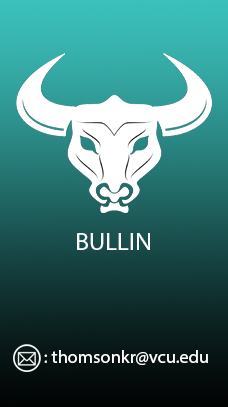
<style>
.page{position:relative;width:228px;height:407px}
.page>*{position:absolute;margin:0}
.t1{font:25px "MyriadPro-Regular";color:#ffffff}
.t2{font:18.3px "MyriadPro-Regular";color:#ffffff}
</style>
<div class="page">
<p class="t1" style="left:77px;top:233px;width:73px;height:17px">BULLIN</p>
<p class="t2" style="left:44px;top:350px;width:164px;height:15px">: thomsonkr@vcu.edu</p>
</div>
